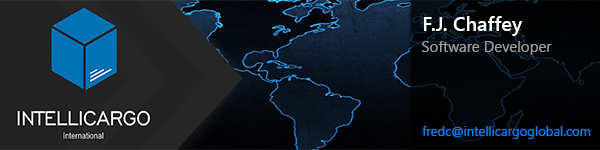
<style>
.page{position:relative;width:600px;height:150px}
.page>*{position:absolute;margin:0}
.t1{font:20px "SegoeUI-Semibold";color:#ffffff}
.t2{font:15px "SegoeUI";color:#9d9c9c}
.t3{font:13px "SegoeUI";color:#0080ff}
</style>
<div class="page">
<p class="t1" style="left:424px;top:16px;width:98px;height:20px">F.J. Chaffey</p>
<p class="t2" style="left:422px;top:41px;width:130px;height:14px">Software Developer</p>
<p class="t3" style="left:422px;top:126px;width:169px;height:13px">fredc@intellicargoglobal.com</p>
</div>
